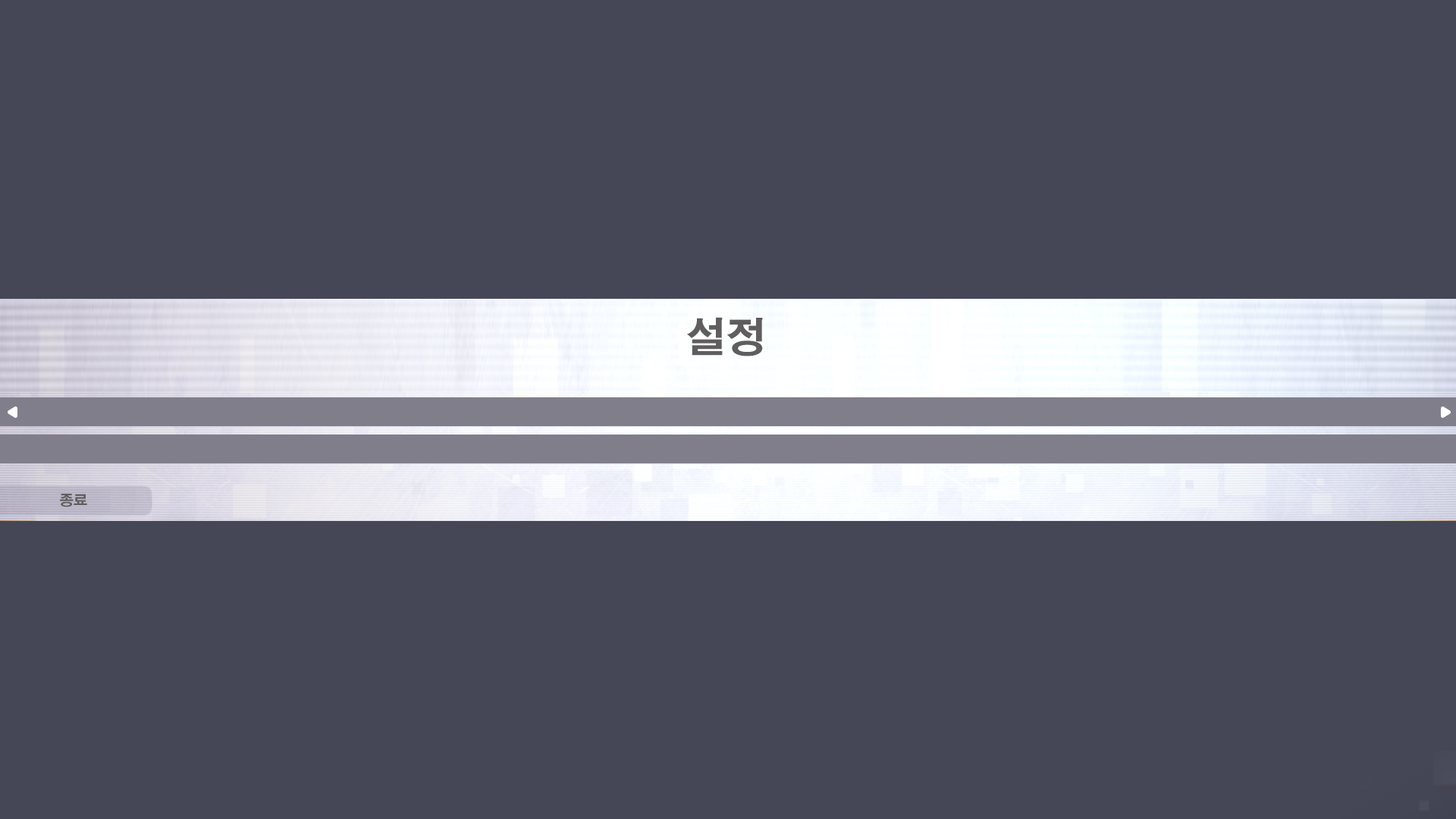
<style>
.page{position:relative;width:1456px;height:819px;background:#454756}
.page>*{position:absolute;margin:0}
.t1{font:40.4px "H2gtrE";color:#5f5d5d}
.t2{font:14.2px "H2gtrE";color:#5f5d5d}
</style>
<div class="page">
<p class="t1" style="left:687px;top:317px;width:76px;height:39px">설정</p>
<p class="t2" style="left:60px;top:494px;width:27px;height:13px">종료</p>
</div>
